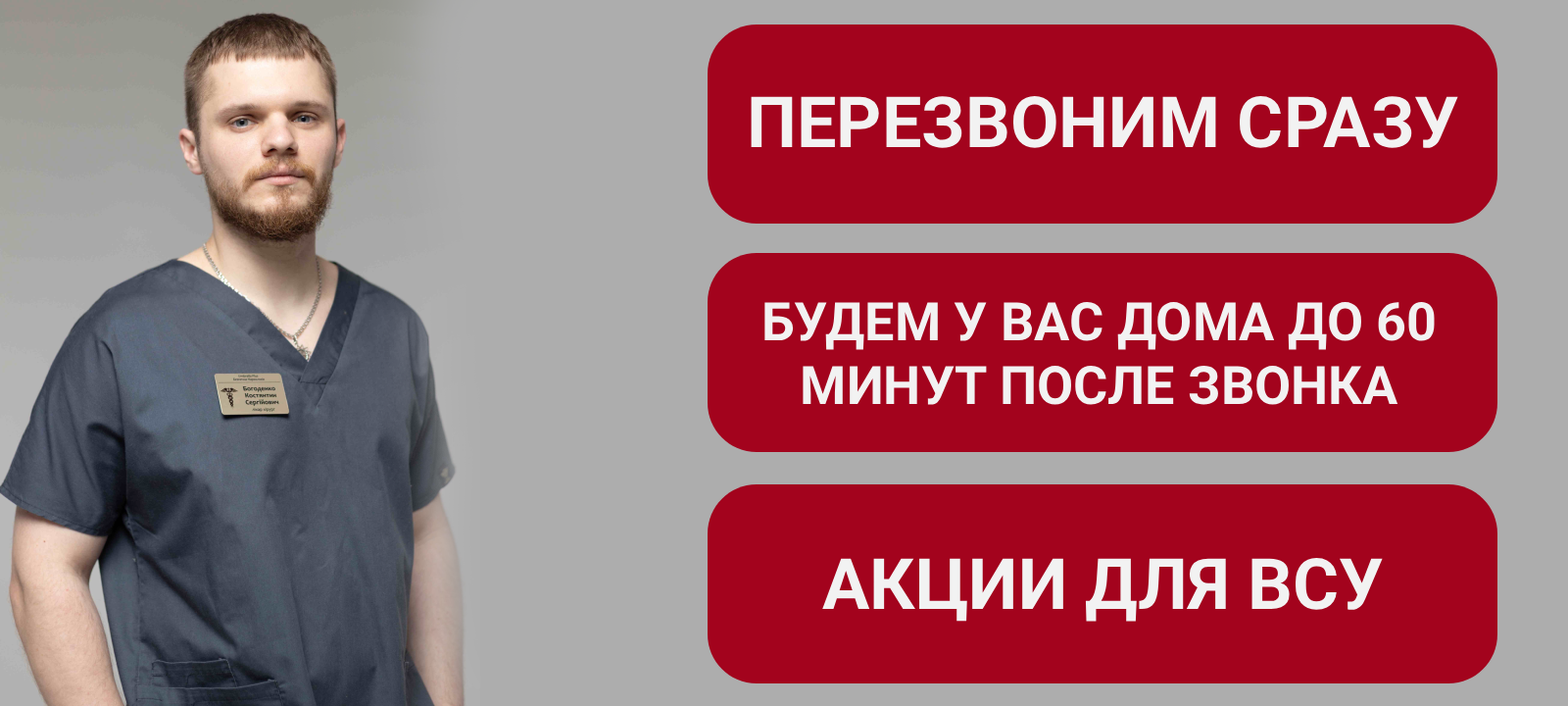
<style>
.page{position:relative;width:1568px;height:706px;background:#a3031d}
.page>*{position:absolute;margin:0}
.t1{font:70.6px "Roboto-Bold";color:#f2f2f2}
.t2{font:52.9px "Roboto-Bold";color:#f2f2f2}
</style>
<div class="page">
<p class="t1" style="left:751px;top:96px;width:707px;height:52px">ПЕРЕЗВОНИМ СРАЗУ</p>
<p class="t2" style="left:764px;top:302px;width:671px;height:103px;text-align:center">БУДЕМ У ВАС ДОМА ДО 60 МИНУТ ПОСЛЕ ЗВОНКА</p>
<p class="t1" style="left:822px;top:558px;width:561px;height:63px">АКЦИИ ДЛЯ ВСУ</p>
</div>
